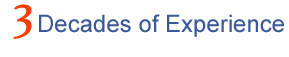
<style>
.page{position:relative;width:289px;height:57px;background:#ffffff}
.page>*{position:absolute;margin:0}
.t1{font:60px "HighTowerText-Reg";color:#f93e05}
.t2{font:24px "ArialMT";color:#3b5998}
</style>
<div class="page">
<p class="t1" style="left:13px;top:4px;width:19px;height:35px">3</p>
<p class="t2" style="left:39px;top:14px;width:245px;height:23px">Decades of Experience</p>
</div>
